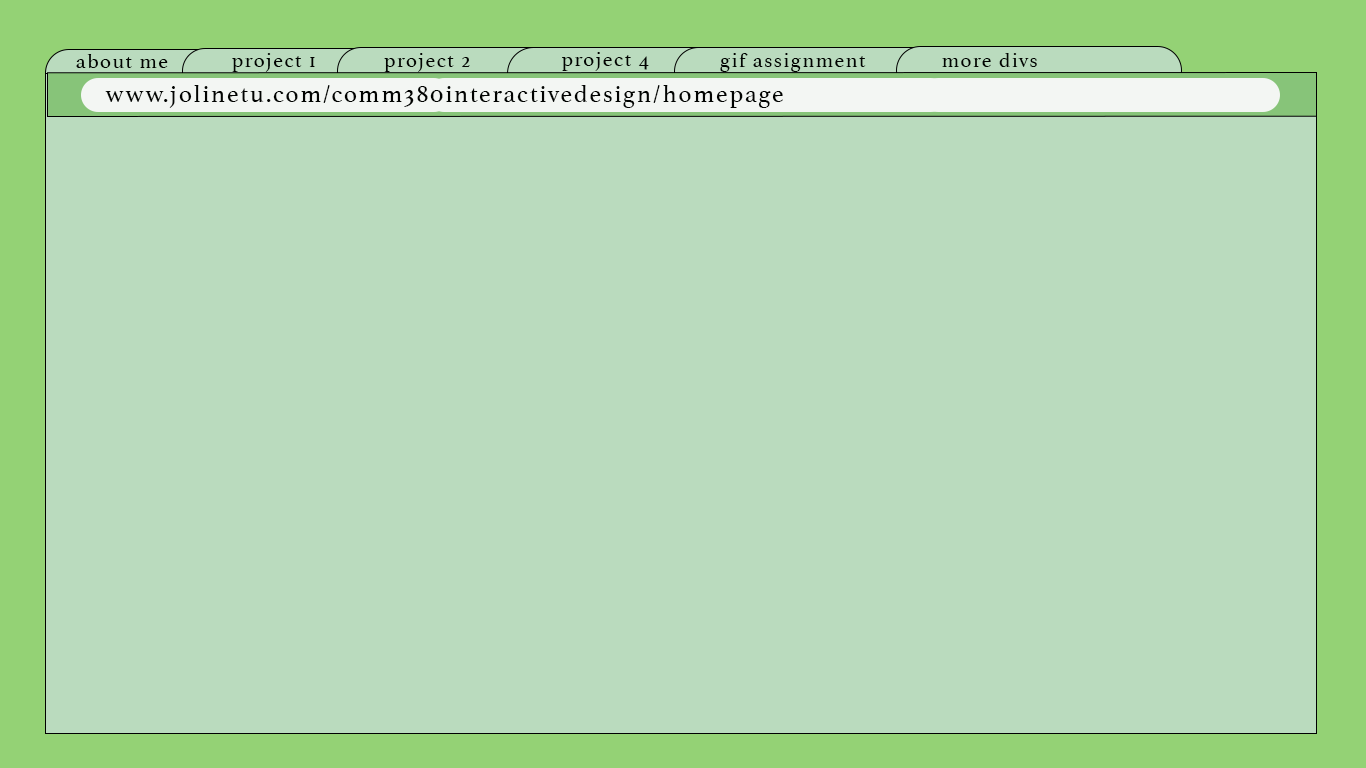
<style>
.page{position:relative;width:1366px;height:768px;background:#badbbe}
.page>*{position:absolute;margin:0}
.t1{font:20.8px "Athelas-Regular";letter-spacing:0.075em;color:#010301}
.t2{font:25px "Athelas-Regular";letter-spacing:0.075em;color:#010301}
</style>
<div class="page">
<p class="t1" style="left:76px;top:54px;width:92px;height:14px">about me</p>
<p class="t1" style="left:232px;top:53px;width:83px;height:19px">project 1</p>
<p class="t1" style="left:384px;top:53px;width:86px;height:19px">project 2</p>
<p class="t1" style="left:562px;top:52px;width:87px;height:19px">project 4</p>
<p class="t1" style="left:720px;top:53px;width:146px;height:19px">gif assignment</p>
<p class="t1" style="left:942px;top:53px;width:95px;height:14px">more divs</p>
<p class="t2" style="left:105px;top:85px;width:678px;height:23px">www.jolinetu.com/comm380interactivedesign/homepage</p>
</div>
